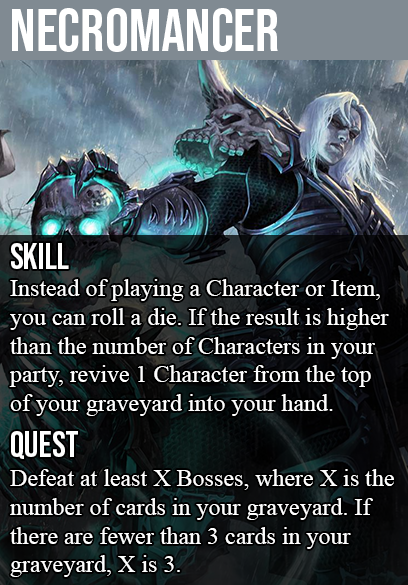
<style>
.page{position:relative;width:408px;height:585px}
.page>*{position:absolute;margin:0}
.t1{font:60px "BebasNeue-Regular";color:#ffffff}
.t2{font:36px "BebasNeue-Regular";color:#ffffff}
.t3{font:24px "TimesNewRomanPSMT";color:#ffffff}
</style>
<div class="page">
<p class="t1" style="left:12px;top:8px;width:266px;height:44px">necromancer</p>
<p class="t2" style="left:11px;top:243px;width:58px;height:26px">skill</p>
<p class="t3" style="left:9px;top:279px;width:380px;height:137px">Instead of playing a Character or Item,<br>you can roll a die. If the result is higher<br>than the number of Characters in your<br>party, revive 1 Character from the top<br>of your graveyard into your hand.</p>
<p class="t2" style="left:11px;top:431px;width:67px;height:28px">QUEST</p>
<p class="t3" style="left:10px;top:469px;width:384px;height:108px">Defeat at least X Bosses, where X is the<br>number of cards in your graveyard. If<br>there are fewer than 3 cards in your<br>graveyard, X is 3.</p>
</div>
